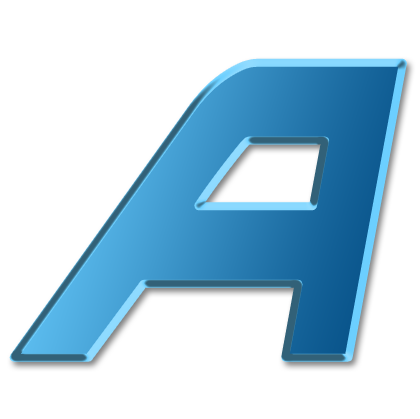
<style>
.page{position:relative;width:420px;height:419px;background:#ffffff}
.page>*{position:absolute;margin:0}
.t1{font:609.8px "GhostClanExpandedItalic";scale:0.69 1}
</style>
<div class="page">
<p class="t1" style="left:13px;top:62px;width:390px;height:296px">A</p>
</div>
